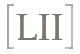
<style>
.page{position:relative;width:80px;height:54px;background:#ffffff}
.page>*{position:absolute;margin:0}
.t1{font:36.5px "Palatino-Roman";letter-spacing:0.01em;color:#68645a}
</style>
<div class="page">
<p class="t1" style="left:16px;top:14px;width:47px;height:26px">LII</p>
<p class="t1" style="left:16px;top:14px;width:47px;height:26px">LII</p>
</div>
